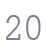
<style>
.page{position:relative;width:46px;height:55px;background:#ffffff}
.page>*{position:absolute;margin:0}
.t1{font:53.8px "DilleniaDSE";letter-spacing:0.05em;color:#7f7f92}
</style>
<div class="page">
<p class="t1" style="left:6px;top:15px;width:35px;height:25px">20</p>
</div>
